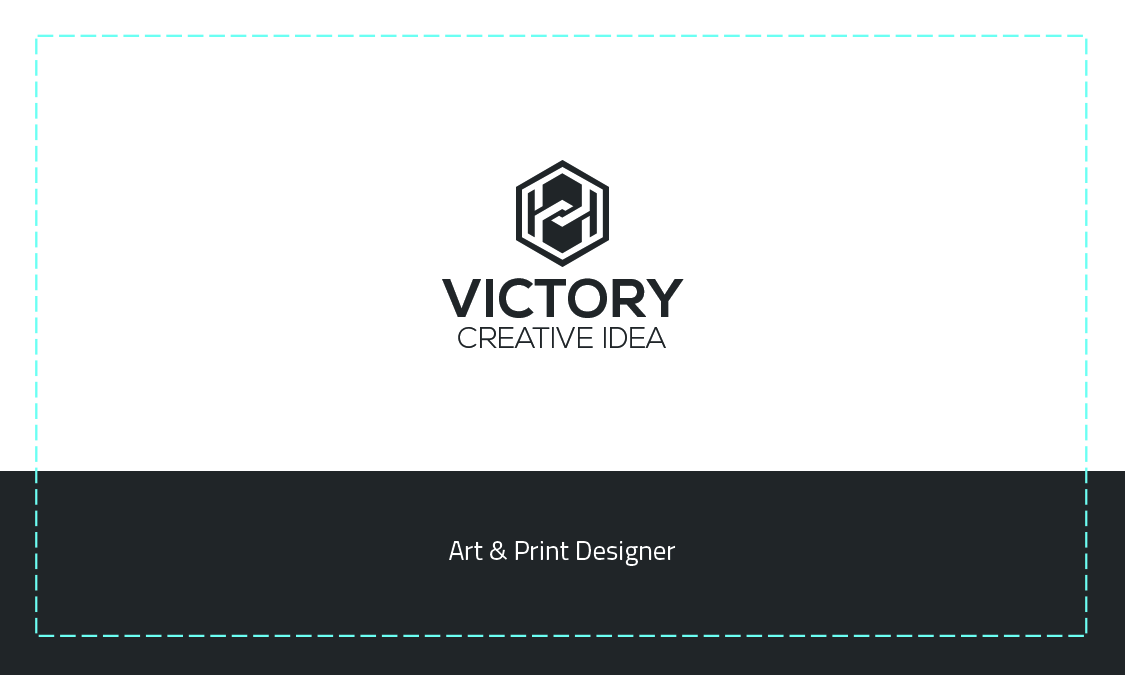
<style>
.page{position:relative;width:1125px;height:675px;background:#ffffff}
.page>*{position:absolute;margin:0}
.t1{font:54.2px "NexaBold";color:#202528}
.t2{font:29.2px "NexaLight";color:#202528}
.t3{font:27.1px "Titillium-Regular";color:#ffffff}
</style>
<div class="page">
<p class="t1" style="left:442px;top:278px;width:242px;height:40px">VICTORY</p>
<p class="t2" style="left:458px;top:327px;width:208px;height:21px">CREATIVE IDEA</p>
<p class="t3" style="left:449px;top:541px;width:227px;height:25px">Art &amp; Print Designer</p>
</div>
